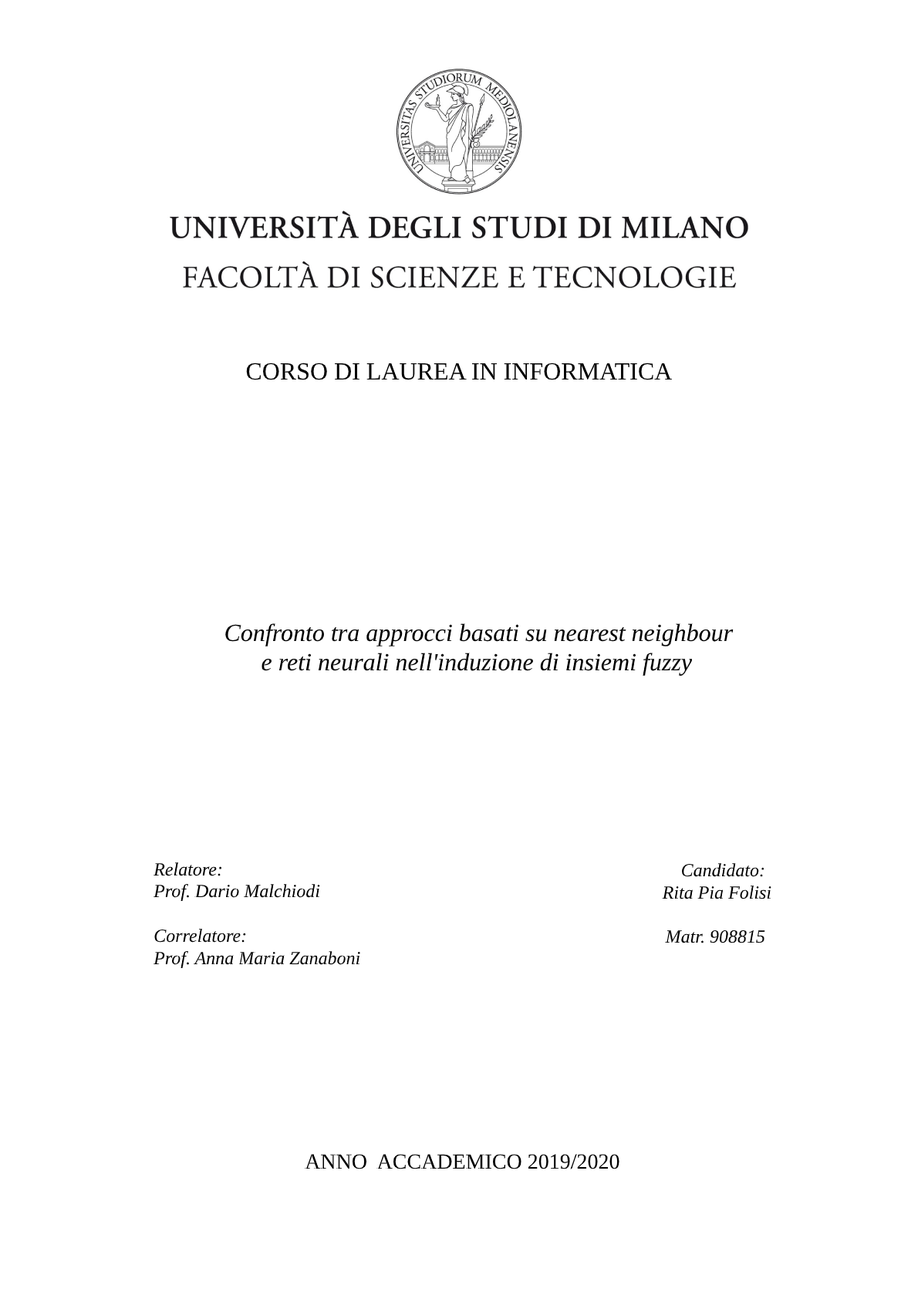
<style>
.page{position:relative;width:918px;height:1299px;background:#ffffff}
.page>*{position:absolute;margin:0}
.t1{font:24.7px "TimesNewRomanPSMT";color:#000000}
.t2{font:24.7px "TimesNewRomanPS-ItalicMT";color:#000000}
.t3{font:18.5px/22.2px "TimesNewRomanPS-ItalicMT";color:#000000}
.t4{font:18.5px "TimesNewRomanPS-ItalicMT";color:#000000}
.t5{font:21.6px "TimesNewRomanPSMT";color:#000000}
</style>
<div class="page">
<p class="t1" style="left:246px;top:363px;width:427px;height:17px">CORSO DI LAUREA IN INFORMATICA</p>
<p class="t2" style="left:225px;top:623px;width:509px;height:53px">Confronto tra approcci basati su nearest neighbour <br>      e reti neurali nell'induzione di insiemi fuzzy</p>
<p class="t3" style="left:154px;top:862px;width:166px;height:40px"><span class="t4">Relatore:</span><br>Prof. Dario Malchiodi</p>
<p class="t4" style="left:681px;top:863px;width:83px;height:14px">Candidato:</p>
<p class="t4" style="left:662px;top:886px;width:109px;height:13px">Rita Pia Folisi</p>
<p class="t3" style="left:154px;top:929px;width:206px;height:40px">Correlatore:<br>Prof. Anna Maria Zanaboni</p>
<p class="t4" style="left:665px;top:930px;width:100px;height:13px">Matr. 908815</p>
<p class="t5" style="left:305px;top:1154px;width:314px;height:15px">ANNO  ACCADEMICO 2019/2020</p>
</div>
